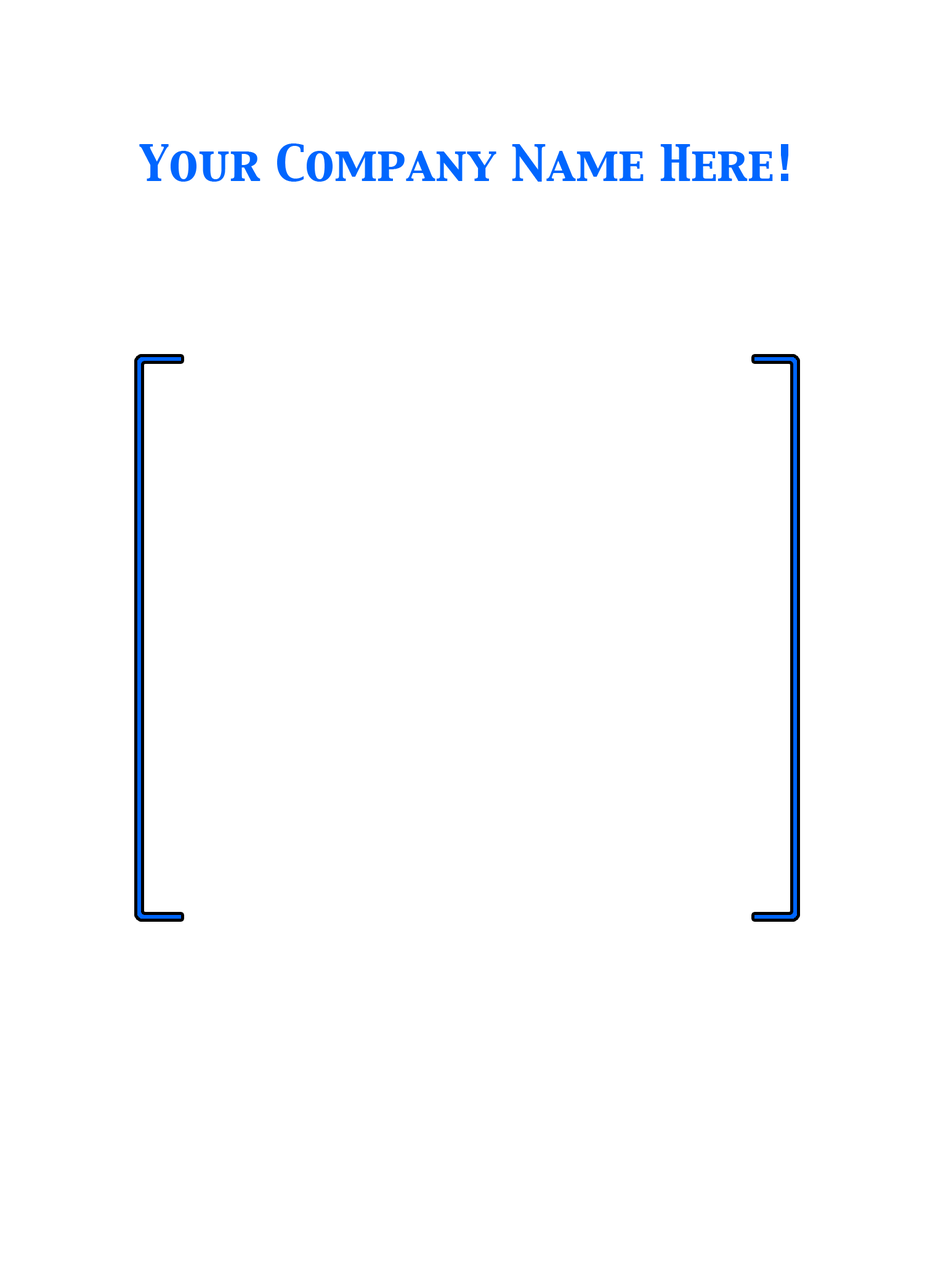
<style>
.page{position:relative;width:946px;height:1261px;background:#ffffff}
.page>*{position:absolute;margin:0}
.t1{font:44.3px "CapitalsRegular";color:#0066ff}
</style>
<div class="page">
<p class="t1" style="left:139px;top:143px;width:649px;height:39px">Your Company Name Here!</p>
</div>
